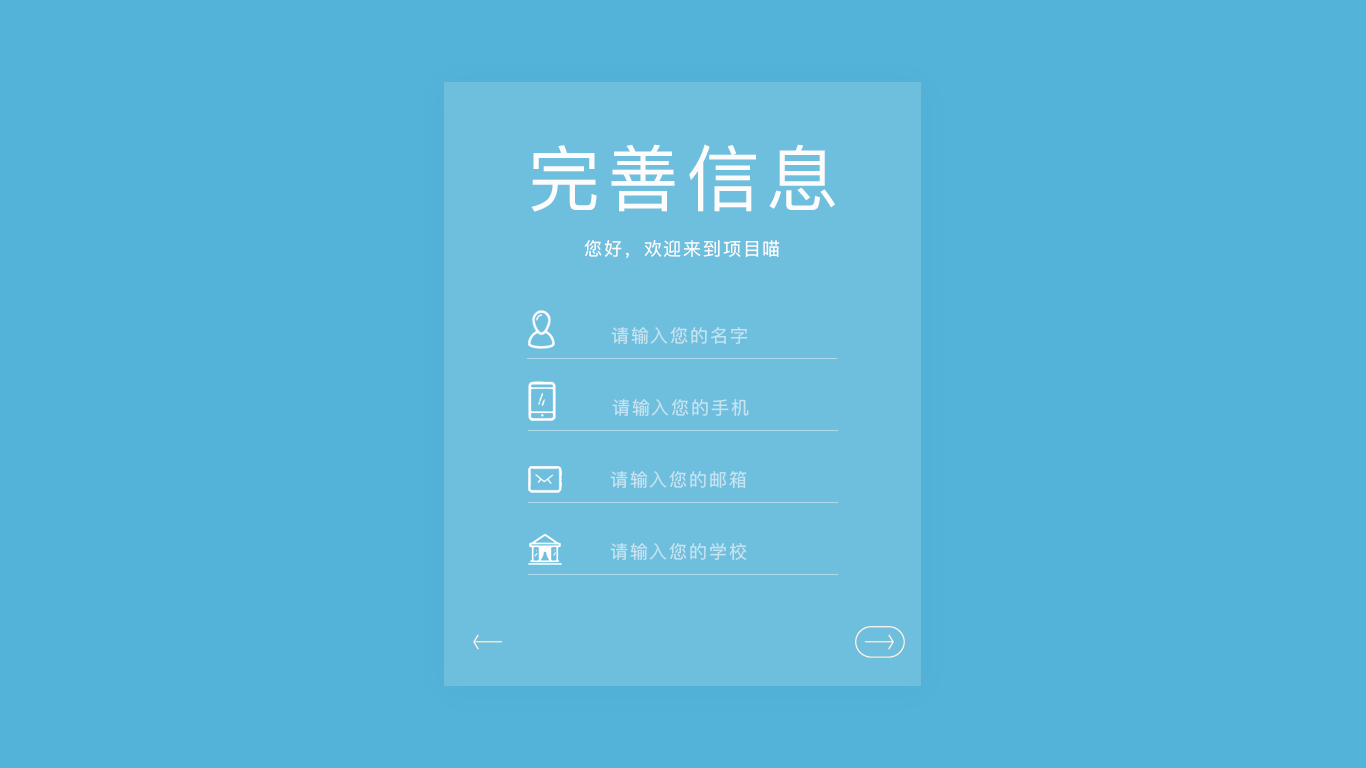
<style>
.page{position:relative;width:1366px;height:768px;background:#54b3d9}
.page>*{position:absolute;margin:0}
.t1{font:72px "PingFangSC-Regular";letter-spacing:0.1em;color:#fcfcfc}
.t2{font:18px "PingFangSC-Regular";letter-spacing:0.1em;color:#fcfcfc}
.t3{font:18px "PingFangSC-Regular";letter-spacing:0.1em;color:#c6e3f0}
</style>
<div class="page">
<p class="t1" style="left:531px;top:144px;width:304px;height:68px">完善信息</p>
<p class="t2" style="left:584px;top:240px;width:196px;height:18px">您好，欢迎来到项目喵</p>
<p class="t3" style="left:611px;top:327px;width:137px;height:17px">请输入您的名字</p>
<p class="t3" style="left:612px;top:399px;width:137px;height:17px">请输入您的手机</p>
<p class="t3" style="left:610px;top:471px;width:137px;height:17px">请输入您的邮箱</p>
<p class="t3" style="left:610px;top:543px;width:137px;height:17px">请输入您的学校</p>
</div>
